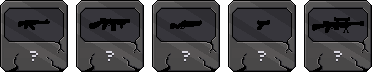
<style>
.page{position:relative;width:372px;height:72px;background:#37363c}
.page>*{position:absolute;margin:0}
.t1{font:20px "PIXY";color:#dad8e1}
</style>
<div class="page">
<p class="t1" style="left:30px;top:51px;width:8px;height:10px">?</p>
<p class="t1" style="left:106px;top:51px;width:8px;height:10px">?</p>
<p class="t1" style="left:182px;top:51px;width:8px;height:10px">?</p>
<p class="t1" style="left:258px;top:51px;width:8px;height:10px">?</p>
<p class="t1" style="left:334px;top:51px;width:8px;height:10px">?</p>
</div>
